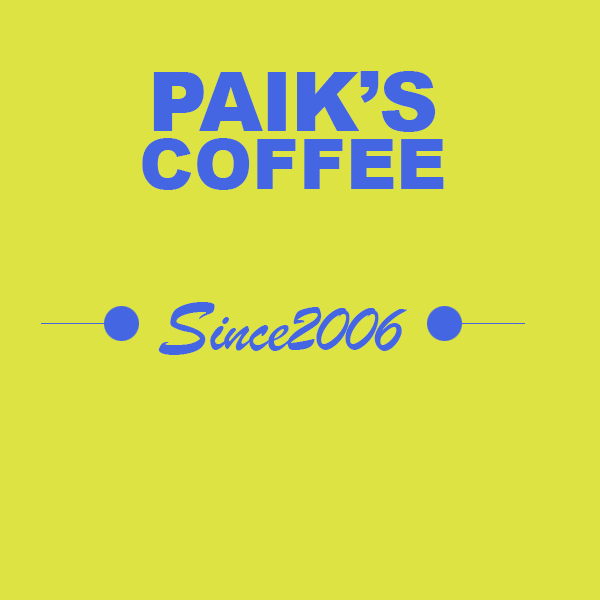
<style>
.page{position:relative;width:600px;height:600px;background:#dee344}
.page>*{position:absolute;margin:0}
.t1{font:82px "Arial-Black";letter-spacing:-0.02em;color:#4566e3}
.t2{font:70px/58px "Arial-Black";color:#4566e3}
.t3{font:70px "BrushScriptMT";letter-spacing:-0.02em;color:#4566e3}
.t4{font:82px "BrushScriptMT";letter-spacing:-0.02em;color:#4566e3}
</style>
<div class="page">
<p class="t1" style="left:142px;top:71px;width:302px;height:119px;text-align:center">PAIK’S<br><span class="t2">COFFEE</span></p>
<p class="t3" style="left:158px;top:302px;width:249px;height:53px"><span class="t4">S</span>ince2006</p>
</div>
